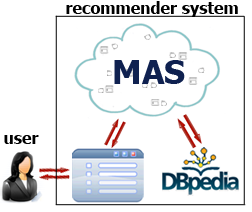
<style>
.page{position:relative;width:252px;height:212px;background:#ffffff}
.page>*{position:absolute;margin:0}
.t1{font:16px "Tahoma-Bold";color:#000000}
.t2{font:33px "Tahoma-Bold";color:#0f2150}
</style>
<div class="page">
<p class="t1" style="left:66px;top:1px;width:172px;height:16px">recommender system</p>
<p class="t2" style="left:114px;top:60px;width:71px;height:24px">MAS</p>
<p class="t1" style="left:4px;top:135px;width:35px;height:9px">user</p>
</div>
